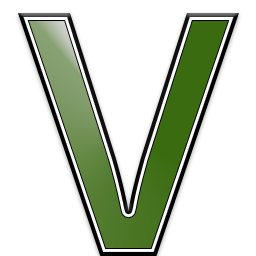
<style>
.page{position:relative;width:256px;height:256px;background:#ffffff}
.page>*{position:absolute;margin:0}
.t1{font:340px "OpenSans-Bold"}
</style>
<div class="page">
<p class="t1" style="left:18px;top:13px;width:221px;height:243px">V</p>
</div>
